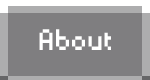
<style>
.page{position:relative;width:150px;height:80px;background:#7f7e80}
.page>*{position:absolute;margin:0}
.t1{font:27.7px "Mouse";color:#ffffff;scale:0.94 1}
</style>
<div class="page">
<p class="t1" style="left:39px;top:29px;width:72px;height:21px">About</p>
</div>
